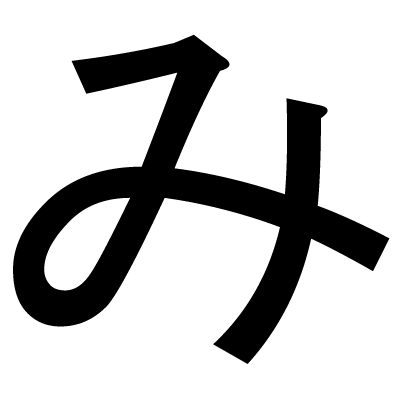
<style>
.page{position:relative;width:400px;height:400px;background:#ffffff}
.page>*{position:absolute;margin:0}
.t1{font:416.7px "MS-PGothic";color:#000000}
</style>
<div class="page">
<p class="t1" style="left:13px;top:34px;width:377px;height:330px">み</p>
</div>
